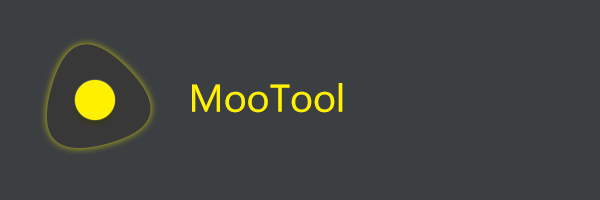
<style>
.page{position:relative;width:600px;height:200px;background:#3c3f41}
.page>*{position:absolute;margin:0}
.t1{font:36px "MicrosoftYaHeiUI";color:#fff100}
</style>
<div class="page">
<p class="t1" style="left:192px;top:83px;width:151px;height:30px">MooTool</p>
</div>
